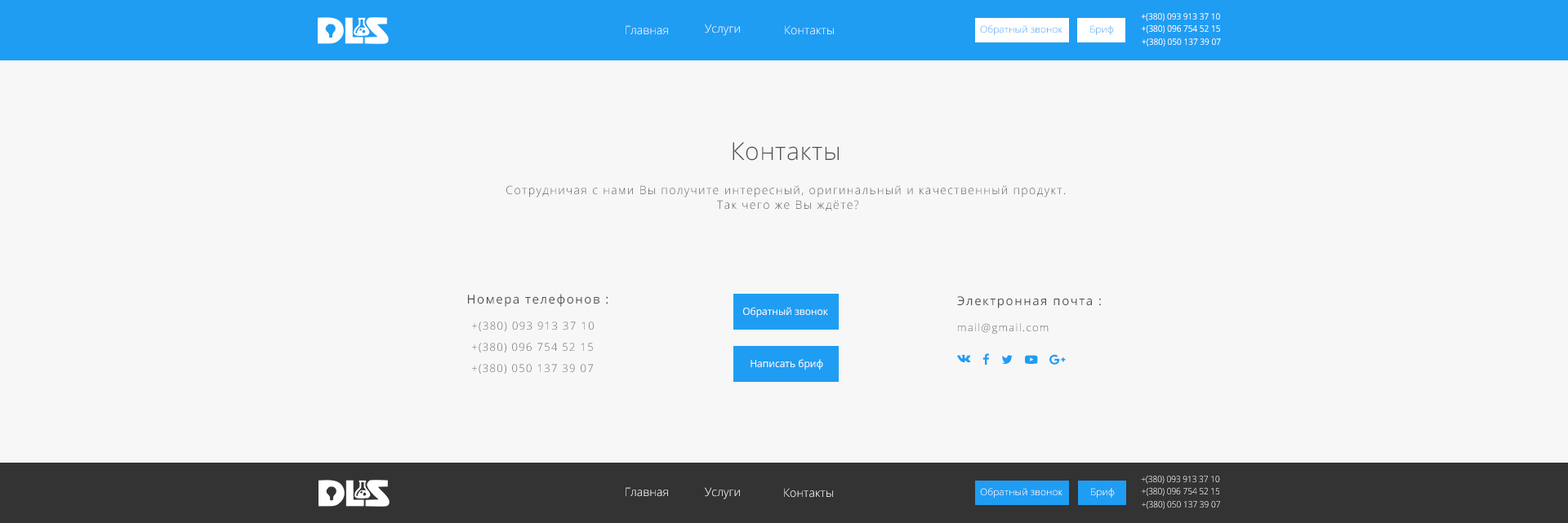
<style>
.page{position:relative;width:1568px;height:523px;background:#f7f7f7}
.page>*{position:absolute;margin:0}
.t1{font:8.8px "OpenSans";color:#ffffff;scale:0.94 1}
.t2{font:11.6px "OpenSans-Light";letter-spacing:0.005em;color:#ffffff}
.t3{font:11.4px "OpenSans-Light";letter-spacing:0.005em}
.t4{font:9.4px "OpenSans-Light";scale:1.05 1}
.t5{font:9.1px "OpenSans";color:#ffffff;scale:0.9 1}
.t6{font:8.7px "OpenSans";scale:0.95 1}
.t7{font:24.6px "OpenSans-Light";letter-spacing:0.02em;color:#515151}
.t8{font:11.6px/14.9px "OpenSans-Light";letter-spacing:0.1em;color:#515151}
.t9{font:12.3px "OpenSans";letter-spacing:0.1em;color:#515151}
.t10{font:12.3px/26.2px "OpenSans";letter-spacing:0.1em;color:#515151}
.t11{font:10.6px/26.2px "OpenSans-Light";letter-spacing:0.1em;color:#515151}
.t12{font:10px "OpenSans";color:#ffffff}
.t13{font:10.7px "OpenSans-Light";letter-spacing:0.1em}
.t14{font:10.1px "OpenSans";color:#ffffff}
.t15{font:8.8px "OpenSans-Light";scale:0.94 1}
.t16{font:11.6px "OpenSans-Light";letter-spacing:0.005em}
.t17{font:9.4px "OpenSans-Light";color:#ffffff;scale:1.05 1}
.t18{font:9.1px "OpenSans-Light";scale:0.9 1}
.t19{font:8.7px "OpenSans-Light";scale:0.95 1}
</style>
<div class="page">
<p class="t1" style="left:1141px;top:13px;width:79px;height:8px">+(380) 093 913 37 10</p>
<p class="t2" style="left:626px;top:25px;width:42px;height:10px">Главная</p>
<p class="t3" style="left:705px;top:24px;width:35px;height:12px">Услуги</p>
<p class="t2" style="left:785px;top:25px;width:49px;height:10px">Контакты</p>
<p class="t4" style="left:980px;top:25px;width:82px;height:10px">Обратный звонок</p>
<p class="t4" style="left:1090px;top:25px;width:24px;height:10px">Бриф</p>
<p class="t5" style="left:1142px;top:24px;width:78px;height:9px">+(380) 096 754 52 15</p>
<p class="t6" style="left:1142px;top:38px;width:79px;height:9px">+(380) 050 137 39 07</p>
<p class="t7" style="left:733px;top:142px;width:106px;height:19px">Контакты</p>
<p class="t8" style="left:506px;top:185px;width:560px;height:27px;text-align:center">Сотрудничая с нами Вы получите интересный, оригинальный и качественный продукт.<br> Так чего же Вы ждёте?</p>
<p class="t9" style="left:468px;top:294px;width:140px;height:13px">Номера телефонов :</p>
<p class="t10" style="left:957px;top:296px;width:144px;height:38px">Электронная почта : <br><span class="t11">mail@gmail.com</span></p>
<p class="t12" style="left:743px;top:307px;width:85px;height:11px">Обратный звонок</p>
<p class="t13" style="left:472px;top:322px;width:122px;height:10px">+(380) 093 913 37 10</p>
<p class="t13" style="left:472px;top:343px;width:121px;height:10px">+(380) 096 754 52 15</p>
<p class="t13" style="left:472px;top:364px;width:121px;height:10px">+(380) 050 137 39 07</p>
<p class="t14" style="left:751px;top:359px;width:72px;height:11px">Написать бриф</p>
<p class="t15" style="left:1141px;top:476px;width:79px;height:8px">+(380) 093 913 37 10</p>
<p class="t2" style="left:626px;top:488px;width:42px;height:9px">Главная</p>
<p class="t16" style="left:705px;top:488px;width:35px;height:12px">Услуги</p>
<p class="t2" style="left:784px;top:488px;width:49px;height:10px">Контакты</p>
<p class="t17" style="left:980px;top:488px;width:82px;height:10px">Обратный звонок</p>
<p class="t4" style="left:1091px;top:488px;width:24px;height:10px">Бриф</p>
<p class="t18" style="left:1142px;top:488px;width:77px;height:9px">+(380) 096 754 52 15</p>
<p class="t19" style="left:1142px;top:501px;width:78px;height:9px">+(380) 050 137 39 07</p>
</div>
